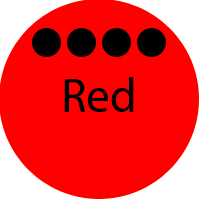
<style>
.page{position:relative;width:200px;height:200px;background:#ff0000}
.page>*{position:absolute;margin:0}
.t1{font:48px "MyriadPro-Regular";color:#000000}
</style>
<div class="page">
<p class="t1" style="left:64px;top:77px;width:70px;height:35px">Red</p>
</div>
